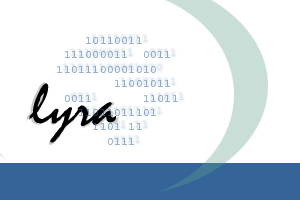
<style>
.page{position:relative;width:300px;height:200px;background:#ffffff}
.page>*{position:absolute;margin:0}
.t1{font:12px "Courier";color:#95aeca}
.t2{font:60px "MysticalPlain"}
.t3{font:56.5px "MysticalPlain";color:#000000}
</style>
<div class="page">
<p class="t1" style="left:57px;top:37px;width:121px;height:108px">10110011   <br>  111000011  0011<br> 11011100001010<br>         11001011<br>  0011       11011<br>    11011011101<br>      1101 11<br>        0111</p>
<p class="t2" style="left:26px;top:82px;width:93px;height:63px">lyra</p>
<p class="t3" style="left:29px;top:83px;width:87px;height:60px">lyra</p>
</div>
